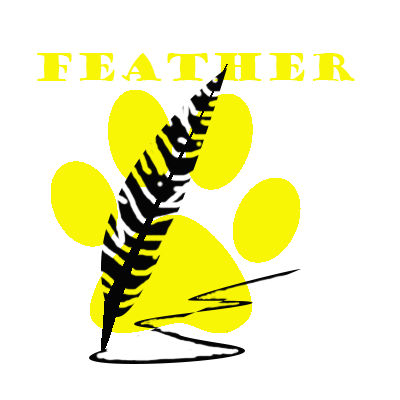
<style>
.page{position:relative;width:400px;height:400px;background:#ffffff}
.page>*{position:absolute;margin:0}
.t1{font:35.6px "GoudyStout";color:#f8f505}
</style>
<div class="page">
<p class="t1" style="left:36px;top:53px;width:319px;height:28px">Feather</p>
</div>
